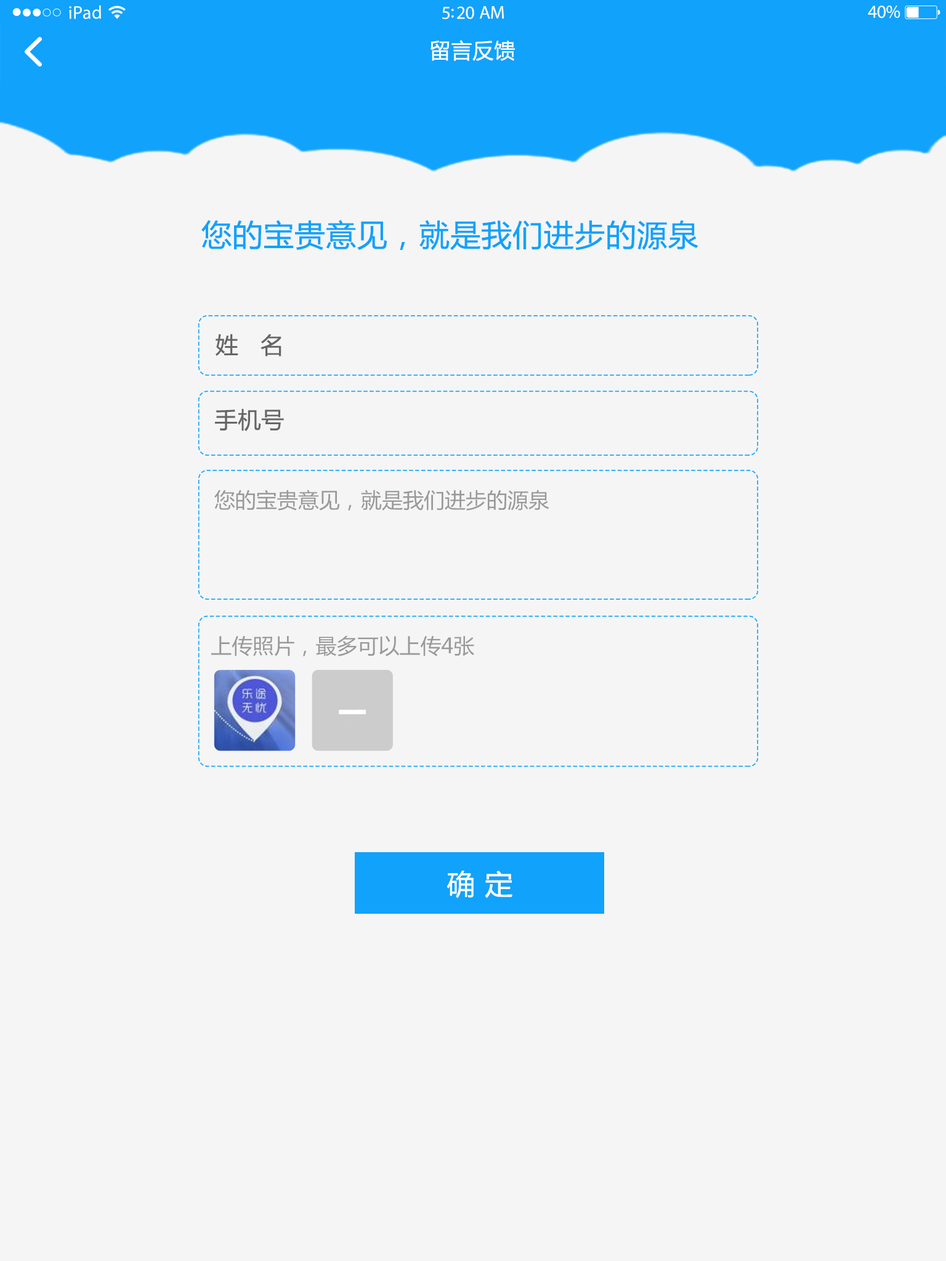
<style>
.page{position:relative;width:946px;height:1261px;background:#f5f5f5}
.page>*{position:absolute;margin:0}
.t1{font:18.5px "MyriadPro-Regular";letter-spacing:0.02em;color:#ffffff}
.t2{font:18.5px "MyriadPro-Regular";letter-spacing:-0.02em;color:#ffffff}
.t3{font:20.9px "MicrosoftYaHei";color:#ffffff;font-weight:bold}
.t4{font:30.3px "MicrosoftYaHei";color:#11a2fb;font-weight:bold}
.t5{font:22.7px "MicrosoftYaHei";color:#666666;font-weight:bold}
.t6{font:21px "MicrosoftYaHei";color:#999999}
.t7{font:27.9px "MicrosoftYaHei";color:#fefefe;font-weight:bold}
</style>
<div class="page">
<p class="t1" style="left:69px;top:5px;width:32px;height:14px">iPad</p>
<p class="t2" style="left:867px;top:6px;width:33px;height:12px">40%</p>
<p class="t2" style="left:442px;top:6px;width:62px;height:13px">5:20 AM</p>
<p class="t3" style="left:430px;top:40px;width:85px;height:21px">留言反馈</p>
<p class="t4" style="left:201px;top:220px;width:497px;height:30px">您的宝贵意见，就是我们进步的源泉</p>
<p class="t5" style="left:215px;top:334px;width:66px;height:22px">姓   名</p>
<p class="t5" style="left:215px;top:409px;width:69px;height:22px">手机号</p>
<p class="t6" style="left:214px;top:489px;width:335px;height:21px">您的宝贵意见，就是我们进步的源泉</p>
<p class="t6" style="left:211px;top:635px;width:263px;height:21px">上传照片，最多可以上传4张</p>
<p class="t7" style="left:446px;top:870px;width:66px;height:28px">确 定</p>
</div>
